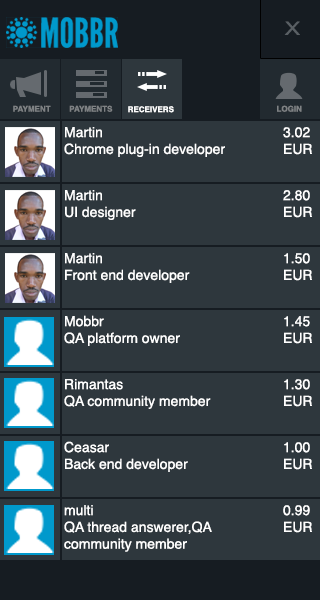
<style>
.page{position:relative;width:320px;height:600px;background:#2e373d}
.page>*{position:absolute;margin:0}
.t1{font:9.3px "ArialNarrow";color:#595f64;scale:1.52 1}
.t2{font:8px "Helvetica-Bold";color:#7f8284}
.t3{font:8px "Helvetica-Bold";color:#ffffff}
.t4{font:14px "Helvetica";color:#ffffff}
</style>
<div class="page">
<p class="t1" style="left:284px;top:21px;width:16px;height:14px">X</p>
<p class="t2" style="left:13px;top:105px;width:38px;height:7px">PAYMENT</p>
<p class="t2" style="left:69px;top:105px;width:44px;height:7px">PAYMENTS</p>
<p class="t3" style="left:128px;top:106px;width:46px;height:7px">RECEIVERS</p>
<p class="t2" style="left:277px;top:105px;width:25px;height:7px">LOGIN</p>
<p class="t4" style="left:64px;top:127px;width:161px;height:30px">Martin<br>Chrome plug-in developer</p>
<p class="t4" style="left:283px;top:127px;width:29px;height:28px">3.02<br>EUR</p>
<p class="t4" style="left:65px;top:190px;width:71px;height:30px">Martin<br>UI designer</p>
<p class="t4" style="left:283px;top:190px;width:29px;height:28px">2.80<br>EUR</p>
<p class="t4" style="left:65px;top:253px;width:125px;height:30px">Martin<br>Front end developer</p>
<p class="t4" style="left:284px;top:253px;width:28px;height:28px">1.50<br>EUR</p>
<p class="t4" style="left:64px;top:315px;width:116px;height:31px">Mobbr<br>QA platform owner</p>
<p class="t4" style="left:284px;top:316px;width:28px;height:28px">1.45<br>EUR</p>
<p class="t4" style="left:64px;top:379px;width:147px;height:30px">Rimantas<br>QA community member</p>
<p class="t4" style="left:284px;top:379px;width:28px;height:28px">1.30<br>EUR</p>
<p class="t4" style="left:64px;top:441px;width:124px;height:31px">Ceasar<br>Back end developer</p>
<p class="t4" style="left:284px;top:442px;width:28px;height:28px">1.00<br>EUR</p>
<p class="t4" style="left:64px;top:505px;width:148px;height:47px">multi<br>QA thread answerer,QA community member</p>
<p class="t4" style="left:283px;top:505px;width:29px;height:28px">0.99<br>EUR</p>
</div>
